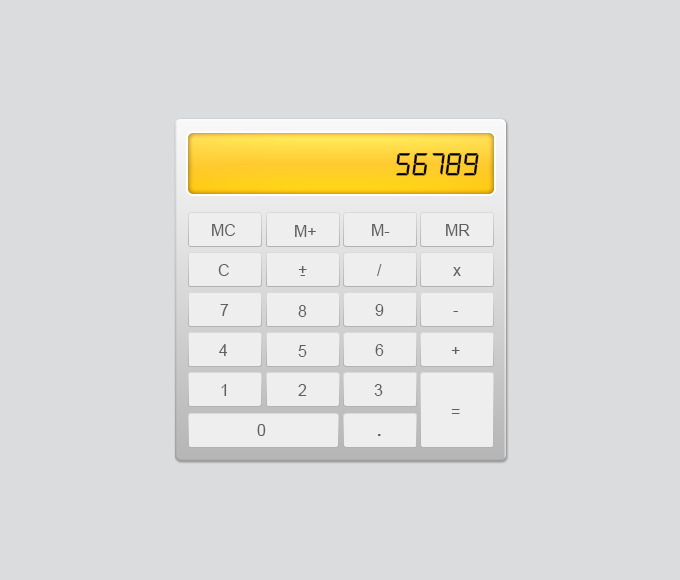
<style>
.page{position:relative;width:680px;height:580px;background:#dbdcde}
.page>*{position:absolute;margin:0}
.t1{font:16px "ArialMT";color:#5f5f5f}
.t2{font:16px "ArialMT"}
.t3{font:16px "Arial-BoldMT";color:#5f5f5f}
</style>
<div class="page">
<p class="t1" style="left:212px;top:224px;width:23px;height:12px">MC</p>
<p class="t1" style="left:295px;top:225px;width:21px;height:12px">M+</p>
<p class="t1" style="left:372px;top:224px;width:18px;height:12px">M-</p>
<p class="t1" style="left:446px;top:224px;width:24px;height:12px">MR</p>
<p class="t1" style="left:218px;top:264px;width:11px;height:12px">C</p>
<p class="t1" style="left:298px;top:266px;width:9px;height:7px">+</p>
<p class="t2" style="left:377px;top:264px;width:5px;height:12px">/</p>
<p class="t1" style="left:453px;top:267px;width:8px;height:9px">x</p>
<p class="t1" style="left:300px;top:275px;width:5px;height:1px">-</p>
<p class="t1" style="left:220px;top:304px;width:9px;height:12px">7</p>
<p class="t1" style="left:298px;top:305px;width:9px;height:12px">8</p>
<p class="t1" style="left:375px;top:304px;width:9px;height:12px">9</p>
<p class="t1" style="left:453px;top:311px;width:5px;height:1px">-</p>
<p class="t1" style="left:219px;top:344px;width:9px;height:12px">4</p>
<p class="t1" style="left:298px;top:345px;width:9px;height:12px">5</p>
<p class="t1" style="left:375px;top:344px;width:9px;height:12px">6</p>
<p class="t1" style="left:451px;top:347px;width:9px;height:7px">+</p>
<p class="t1" style="left:221px;top:384px;width:6px;height:12px">1</p>
<p class="t1" style="left:298px;top:384px;width:9px;height:12px">2</p>
<p class="t1" style="left:374px;top:384px;width:9px;height:12px">3</p>
<p class="t1" style="left:451px;top:409px;width:9px;height:5px">=</p>
<p class="t1" style="left:257px;top:424px;width:9px;height:12px">0</p>
<p class="t3" style="left:378px;top:434px;width:3px;height:2px">.</p>
</div>
